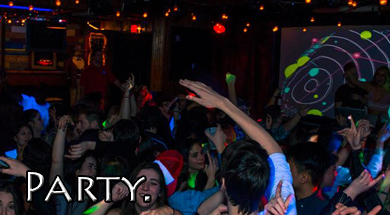
<style>
.page{position:relative;width:390px;height:215px}
.page>*{position:absolute;margin:0}
.t1{font:40px "LithosPro-Regular"}
</style>
<div class="page">
<p class="t1" style="left:27px;top:172px;width:123px;height:30px">Party.</p>
</div>
